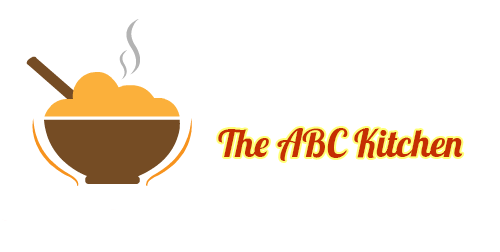
<style>
.page{position:relative;width:500px;height:252px;background:#ffffff}
.page>*{position:absolute;margin:0}
.t1{font:38px "UVFLobster12";color:#c52e02}
</style>
<div class="page">
<p class="t1" style="left:218px;top:128px;width:245px;height:33px">The ABC Kitchen</p>
</div>
